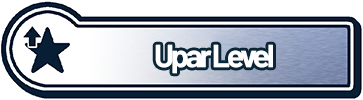
<style>
.page{position:relative;width:363px;height:100px;background:#ffffff}
.page>*{position:absolute;margin:0}
.t1{font:32px "Barlow-Bold";letter-spacing:-0.1em;color:#ffffff}
</style>
<div class="page">
<p class="t1" style="left:155px;top:44px;width:118px;height:30px">Upar Level</p>
</div>
